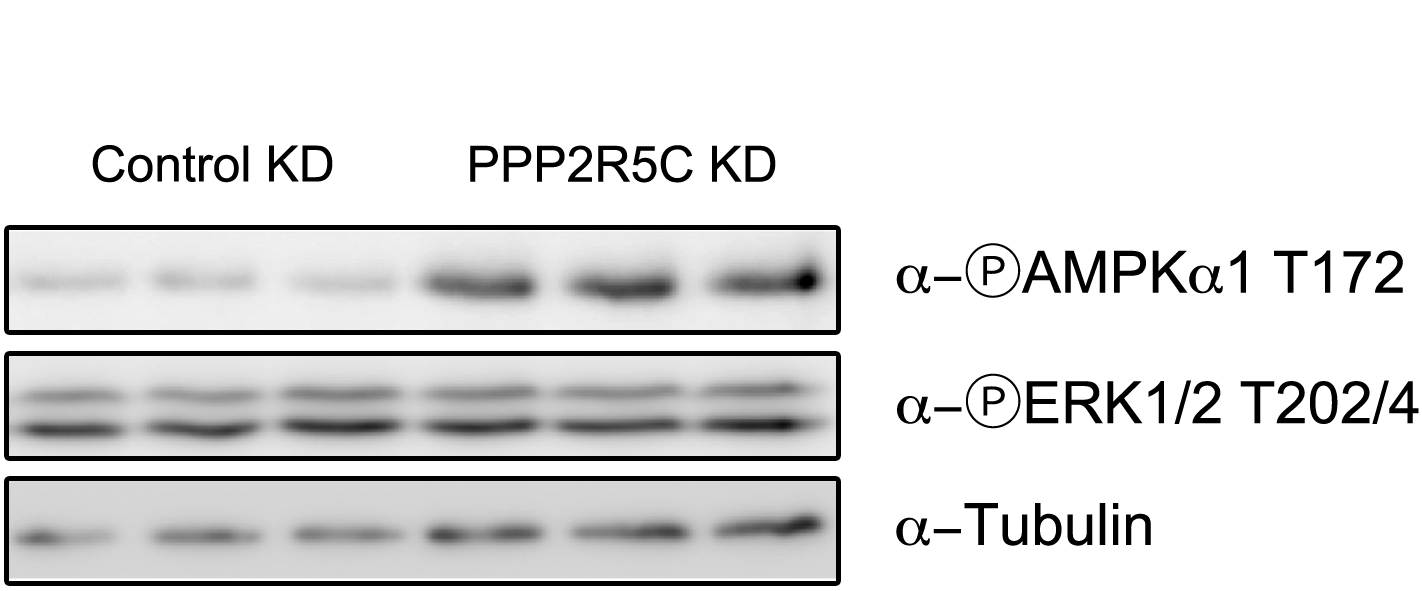
<style>
.page{position:relative;width:1422px;height:591px;background:#ffffff}
.page>*{position:absolute;margin:0}
.t1{font:50px "ArialMT";color:#000000}
.t2{font:58.3px "ArialMT";color:#000000}
.t3{font:58.3px "Symbol";color:#000000}
.t4{font:58.3px "KozGoPr6N-Regular";color:#000000}
</style>
<div class="page">
<p class="t1" style="left:92px;top:145px;width:241px;height:38px">Control KD</p>
<p class="t1" style="left:470px;top:145px;width:306px;height:38px">PPP2R5C KD</p>
<p class="t2" style="left:896px;top:243px;width:507px;height:55px"><span class="t3">a-</span><span class="t4">Ⓟ</span>AMPK<span class="t3">a</span>1 T172</p>
<p class="t2" style="left:897px;top:373px;width:522px;height:56px"><span class="t3">a-</span><span class="t4">Ⓟ</span>ERK1/2 T202/4</p>
<p class="t2" style="left:896px;top:503px;width:255px;height:43px"><span class="t3">a-</span>Tubulin</p>
</div>
